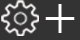
<style>
.page{position:relative;width:80px;height:40px;background:#333333}
.page>*{position:absolute;margin:0}
.t1{font:57.8px "HelveticaNeue-Light";color:#fefefe}
</style>
<div class="page">
<p class="t1" style="left:45px;top:4px;width:30px;height:29px">+</p>
</div>
